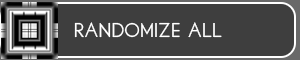
<style>
.page{position:relative;width:300px;height:60px;background:#3e3e3e}
.page>*{position:absolute;margin:0}
.t1{font:14px "LibbyRegular";color:#ffffff}
</style>
<div class="page">
<p class="t1" style="left:74px;top:22px;width:148px;height:16px">Randomize all</p>
</div>
